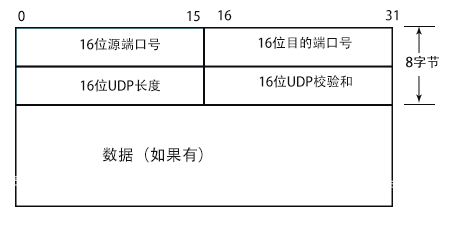
<style>
.page{position:relative;width:453px;height:227px;background:#ffffff}
.page>*{position:absolute;margin:0}
.t1{font:13.3px "AdobeHeitiStd-Regular";color:#141212}
.t2{font:16px "AdobeHeitiStd-Regular";color:#141212}
</style>
<div class="page">
<p class="t1" style="left:18px;top:10px;width:7px;height:12px">0</p>
<p class="t1" style="left:187px;top:11px;width:13px;height:11px">15</p>
<p class="t1" style="left:218px;top:10px;width:14px;height:11px">16</p>
<p class="t1" style="left:385px;top:10px;width:13px;height:11px">31</p>
<p class="t1" style="left:80px;top:38px;width:81px;height:13px">16位源端口号</p>
<p class="t1" style="left:258px;top:36px;width:94px;height:13px">16位目的端口号</p>
<p class="t1" style="left:259px;top:75px;width:93px;height:13px">16位UDP校验和</p>
<p class="t1" style="left:80px;top:79px;width:81px;height:13px">16位UDP长度</p>
<p class="t2" style="left:102px;top:147px;width:101px;height:16px">数据（如果有）</p>
</div>
